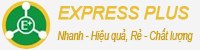
<style>
.page{position:relative;width:200px;height:50px;background:#f4f4f4}
.page>*{position:absolute;margin:0}
.t1{font:18px "Arial-ItalicMT";color:#e8bf37;text-transform:uppercase;font-weight:bold;scale:0.92 1}
.t2{font:12px "Arial-ItalicMT";color:#caa00d;scale:0.72 1}
</style>
<div class="page">
<p class="t1" style="left:58px;top:6px;width:131px;height:14px">express plus</p>
<p class="t2" style="left:57px;top:28px;width:136px;height:14px">Nhanh - Hiệu quả, Rẻ - Chất lượng</p>
</div>
